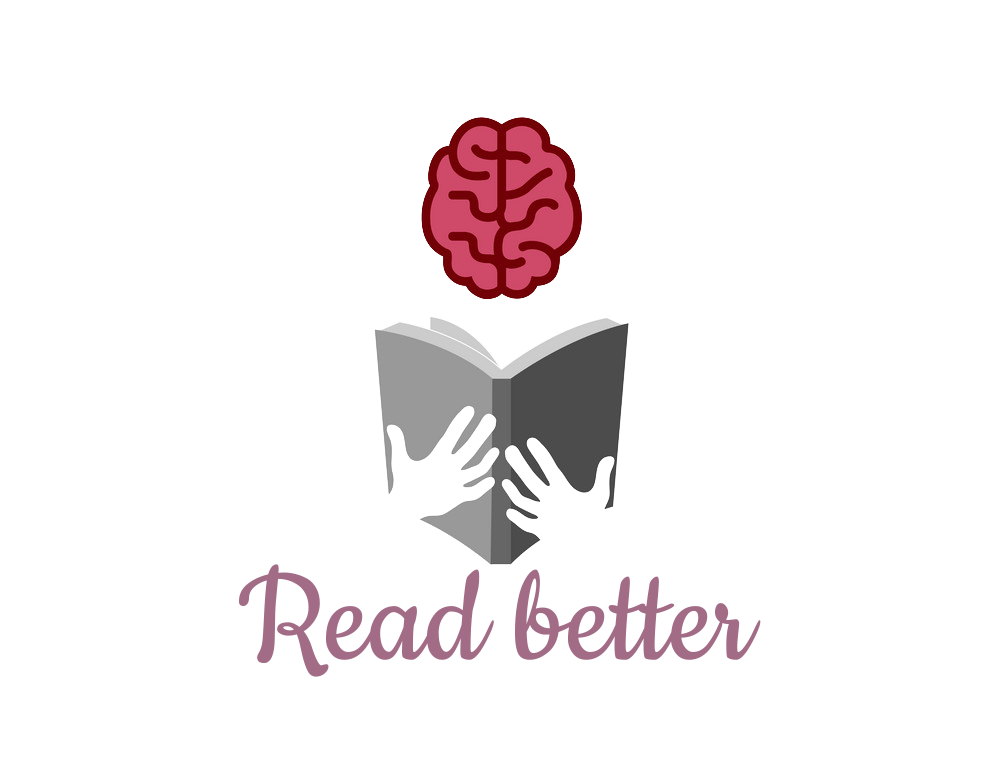
<style>
.page{position:relative;width:1000px;height:780px;background:#ffffff}
.page>*{position:absolute;margin:0}
.t1{font:148.6px "Cookie-Regular";color:#a26c86}
</style>
<div class="page">
<p class="t1" style="left:239px;top:564px;width:522px;height:113px">Read better</p>
</div>
